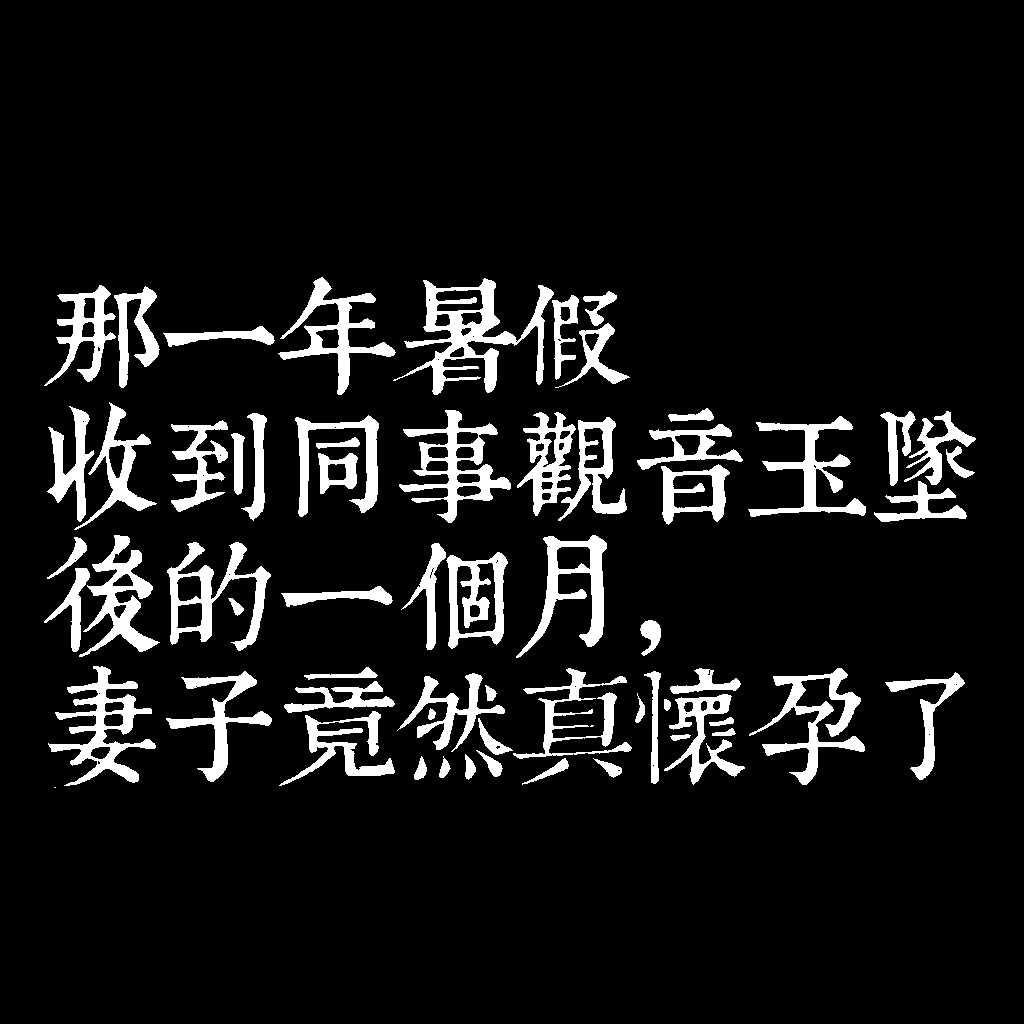
<style>
.page{position:relative;width:1024px;height:1024px;background:#000000}
.page>*{position:absolute;margin:0}
.t1{font:120px/130px "TpldKhangXiDictTrial";letter-spacing:-0.02em;color:#ffffff}
</style>
<div class="page">
<p class="t1" style="left:44px;top:277px;width:932px;height:511px">那一年暑假<br>收到同事觀音玉墜<br>後的一個月，<br>妻子竟然真懷孕了</p>
</div>
